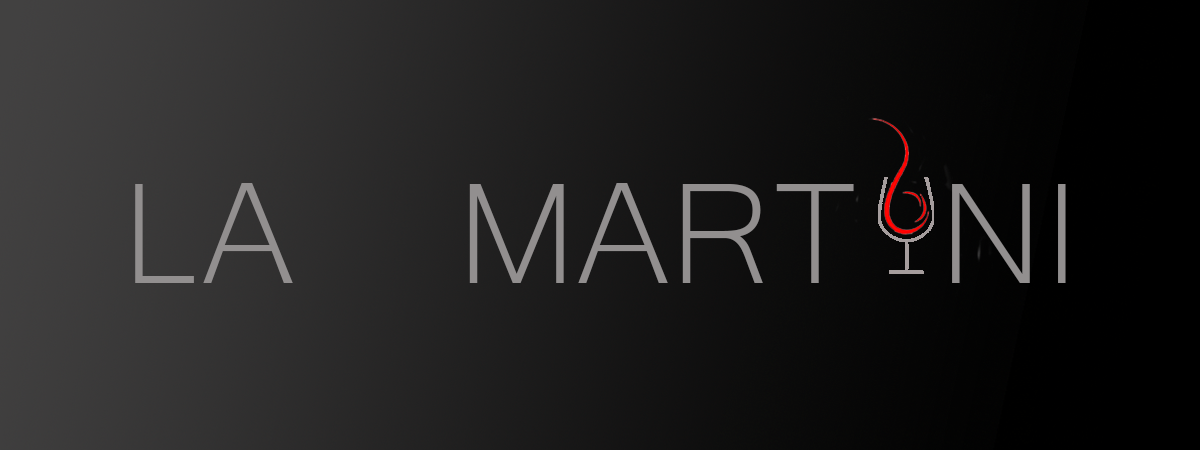
<style>
.page{position:relative;width:1200px;height:450px}
.page>*{position:absolute;margin:0}
.t1{font:185.9px "Microsoft-Yi-Baiti";color:#928f8f}
</style>
<div class="page">
<p class="t1" style="left:135px;top:183px;width:931px;height:100px">LA  MART NI</p>
</div>
